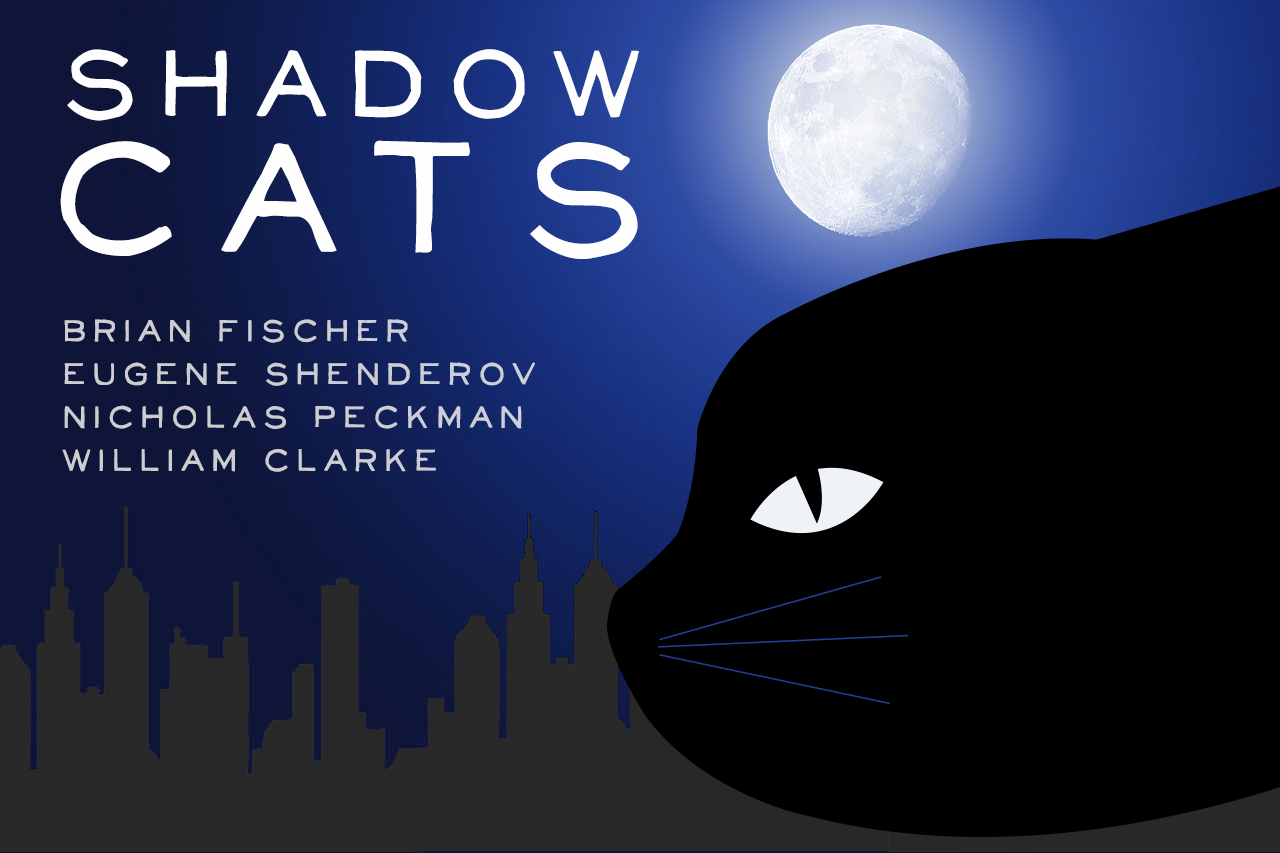
<style>
.page{position:relative;width:1280px;height:853px;background:#000000}
.page>*{position:absolute;margin:0}
.t1{font:112px/140px "NeoRetroFill";letter-spacing:0.1em;color:#fefefe;font-variant:small-caps;font-weight:bold}
.t2{font:185px/140px "NeoRetroFill";letter-spacing:0.1em;color:#fefefe;font-variant:small-caps;font-weight:bold}
.t3{font:36px "NeoRetroFill";letter-spacing:0.1em;color:#cccdd3;font-weight:bold}
</style>
<div class="page">
<p class="t1" style="left:60px;top:49px;width:579px;height:210px;text-align:center">SHADOW<br><span class="t2">CATS</span></p>
<p class="t3" style="left:62px;top:319px;width:473px;height:153px">Brian fischer<br>Eugene Shenderov<br>Nicholas peckman<br>william clarke</p>
</div>
